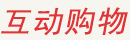
<style>
.page{position:relative;width:130px;height:40px;background:#f7f5f0}
.page>*{position:absolute;margin:0}
.t1{font:30px "SimHei";letter-spacing:0.065em;color:#e13436;font-style:italic}
</style>
<div class="page">
<p class="t1" style="left:1px;top:7px;width:127px;height:29px">互动购物</p>
</div>
